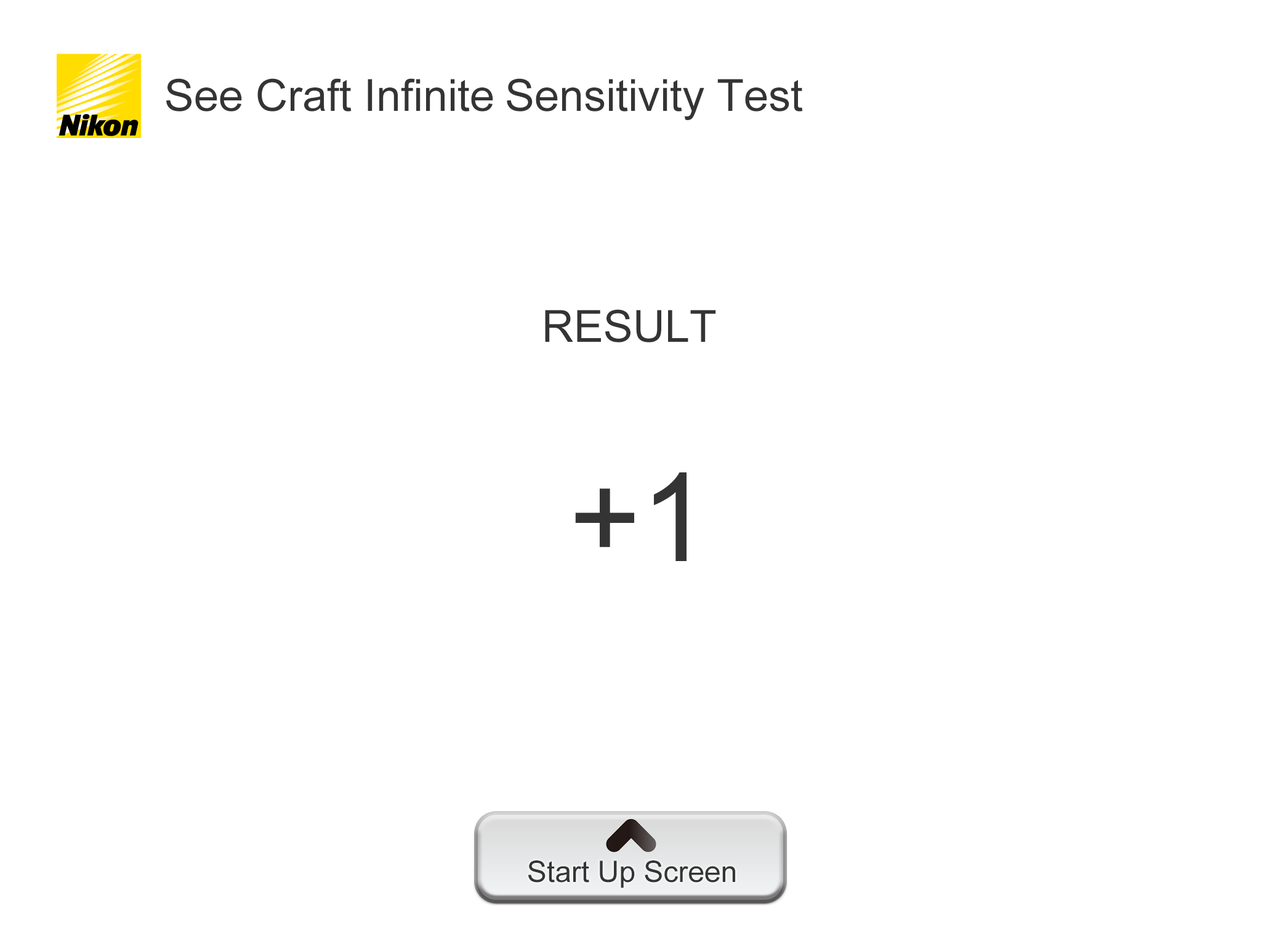
<style>
.page{position:relative;width:1261px;height:946px;background:#ffffff}
.page>*{position:absolute;margin:0}
.t1{font:44.3px "ArialMT";color:#343434}
.t2{font:123.1px "ArialMT";color:#343434}
.t3{font:29.6px "ArialMT";color:#343434}
</style>
<div class="page">
<p class="t1" style="left:166px;top:78px;width:637px;height:42px">See Craft Infinite Sensitivity Test</p>
<p class="t1" style="left:545px;top:309px;width:171px;height:33px">RESULT</p>
<p class="t2" style="left:575px;top:472px;width:111px;height:89px">+1</p>
<p class="t3" style="left:528px;top:860px;width:207px;height:28px">Start Up Screen</p>
</div>
